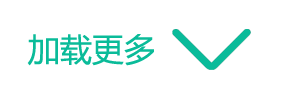
<style>
.page{position:relative;width:286px;height:98px;background:#ffffff}
.page>*{position:absolute;margin:0}
.t1{font:32px "MicrosoftYaHeiUI";color:#0abb99}
</style>
<div class="page">
<p class="t1" style="left:27px;top:34px;width:127px;height:32px">加载更多</p>
</div>
